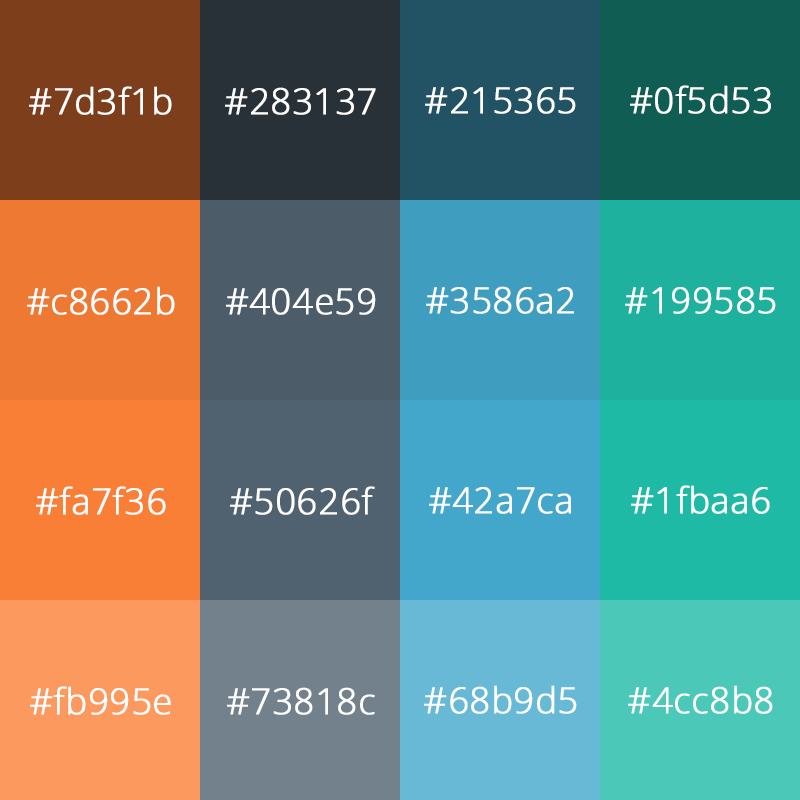
<style>
.page{position:relative;width:800px;height:800px}
.page>*{position:absolute;margin:0}
.t1{font:36px "OpenSans-Light";color:#ffffff;font-weight:bold}
</style>
<div class="page">
<p class="t1" style="left:29px;top:86px;width:143px;height:29px">#7d3f1b</p>
<p class="t1" style="left:225px;top:87px;width:151px;height:28px">#283137</p>
<p class="t1" style="left:425px;top:87px;width:151px;height:27px">#215365</p>
<p class="t1" style="left:630px;top:85px;width:141px;height:29px">#0f5d53</p>
<p class="t1" style="left:27px;top:286px;width:148px;height:29px">#c8662b</p>
<p class="t1" style="left:226px;top:288px;width:150px;height:27px">#404e59</p>
<p class="t1" style="left:426px;top:286px;width:148px;height:28px">#3586a2</p>
<p class="t1" style="left:625px;top:286px;width:151px;height:28px">#199585</p>
<p class="t1" style="left:36px;top:486px;width:130px;height:29px">#fa7f36</p>
<p class="t1" style="left:230px;top:486px;width:145px;height:29px">#50626f</p>
<p class="t1" style="left:631px;top:485px;width:139px;height:29px">#1fbaa6</p>
<p class="t1" style="left:429px;top:487px;width:142px;height:27px">#42a7ca</p>
<p class="t1" style="left:30px;top:686px;width:141px;height:29px">#fb995e</p>
<p class="t1" style="left:227px;top:687px;width:148px;height:28px">#73818c</p>
<p class="t1" style="left:424px;top:685px;width:153px;height:29px">#68b9d5</p>
<p class="t1" style="left:628px;top:685px;width:145px;height:29px">#4cc8b8</p>
</div>
